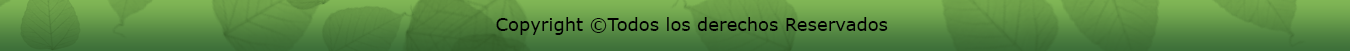
<style>
.page{position:relative;width:1350px;height:51px}
.page>*{position:absolute;margin:0}
.t1{font:18px "Verdana";color:#000000}
</style>
<div class="page">
<p class="t1" style="left:496px;top:17px;width:392px;height:18px">Copyright ©Todos los derechos Reservados</p>
</div>
